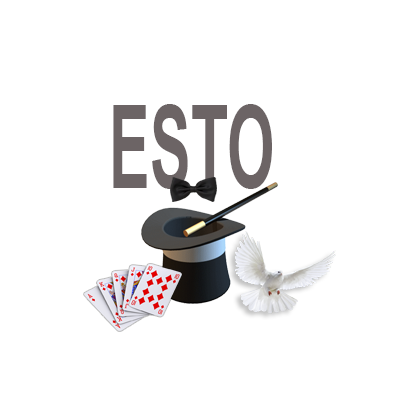
<style>
.page{position:relative;width:400px;height:400px;background:#ffffff}
.page>*{position:absolute;margin:0}
.t1{font:115px "Arial-BoldMT";color:#6c6465;scale:0.53 1}
</style>
<div class="page">
<p class="t1" style="left:113px;top:104px;width:159px;height:85px">ESTO</p>
</div>
